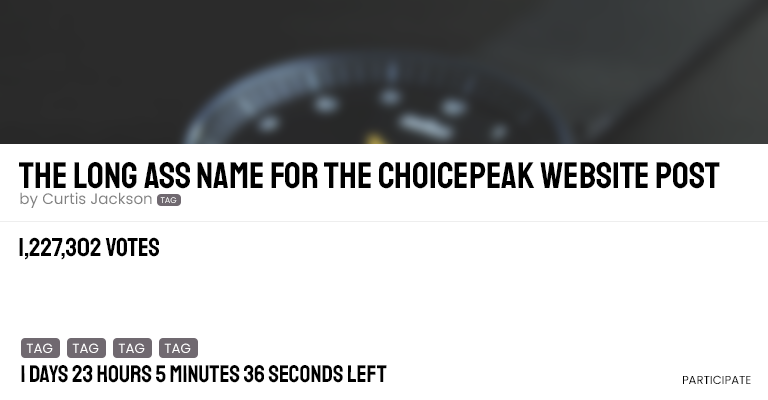
<style>
.page{position:relative;width:768px;height:400px;background:#ffffff}
.page>*{position:absolute;margin:0}
.t1{font:37px "Staatliches-Regular";color:#000000}
.t2{font:15.1px "Poppins-Regular";color:#818181}
.t3{font:8.2px "Poppins-Regular"}
.t4{font:25.9px "Staatliches-Regular";color:#000000}
.t5{font:13.3px "Poppins-Regular";color:#ffffff}
.t6{font:24px "Staatliches-Regular";color:#000000}
.t7{font:11.6px "Poppins-Regular";color:#000000}
</style>
<div class="page">
<p class="t1" style="left:19px;top:162px;width:701px;height:27px">THE LONG ASS NAME FOR THE choicepeak WEBSITE POST</p>
<p class="t2" style="left:20px;top:192px;width:132px;height:16px">by Curtis Jackson</p>
<p class="t3" style="left:160px;top:197px;width:17px;height:6px">TAG</p>
<p class="t4" style="left:19px;top:237px;width:140px;height:23px">1,227,302 votes</p>
<p class="t5" style="left:26px;top:343px;width:27px;height:10px">TAG</p>
<p class="t5" style="left:72px;top:343px;width:27px;height:10px">TAG</p>
<p class="t5" style="left:118px;top:343px;width:27px;height:10px">TAG</p>
<p class="t5" style="left:164px;top:343px;width:27px;height:10px">TAG</p>
<p class="t6" style="left:21px;top:365px;width:366px;height:18px">1 days 23 hours 5 minutes 36 seconds left</p>
<p class="t7" style="left:683px;top:375px;width:68px;height:9px">PARTICIPATE</p>
</div>
